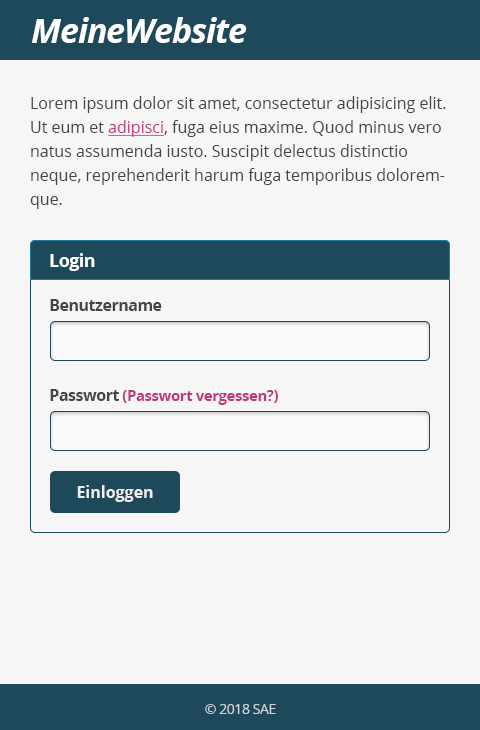
<style>
.page{position:relative;width:480px;height:730px;background:#f6f6f6}
.page>*{position:absolute;margin:0}
.t1{font:34px "OpenSans-BoldItalic";letter-spacing:-0.03em;color:#ffffff}
.t2{font:16px/24px "OpenSans";color:#444444}
.t3{font:16px/24px "OpenSans";color:#be3777;text-decoration:underline}
.t4{font:18px "OpenSans-Bold";letter-spacing:-0.03em;color:#ffffff}
.t5{font:16px "OpenSans-Bold";letter-spacing:-0.03em;color:#444444}
.t6{font:15px "OpenSans-Bold";letter-spacing:-0.03em;color:#be3777}
.t7{font:16px "OpenSans-Bold";color:#efefef}
.t8{font:14px "OpenSans";letter-spacing:-0.03em;color:#ced4d7}
</style>
<div class="page">
<p class="t1" style="left:31px;top:17px;width:216px;height:26px">MeineWebsite</p>
<p class="t2" style="left:30px;top:96px;width:416px;height:113px">Lorem ipsum dolor sit amet, consectetur adipisicing elit. Ut eum et <span class="t3">adipisci</span>, fuga eius maxime. Quod minus vero natus assumenda iusto. Suscipit delectus distinctio neque, reprehenderit harum fuga temporibus doloremque.</p>
<p class="t4" style="left:50px;top:253px;width:45px;height:18px">Login</p>
<p class="t5" style="left:50px;top:299px;width:112px;height:12px">Benutzername</p>
<p class="t6" style="left:50px;top:389px;width:228px;height:16px"><span class="t5">Passwort</span> (Passwort vergessen?)</p>
<p class="t7" style="left:77px;top:485px;width:76px;height:17px">Einloggen</p>
<p class="t8" style="left:205px;top:704px;width:71px;height:10px">© 2018 SAE</p>
</div>
